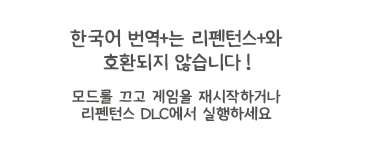
<style>
.page{position:relative;width:373px;height:167px;background:#ffffff}
.page>*{position:absolute;margin:0}
.t1{font:16px/17px "XiaolaiSC";letter-spacing:-0.075em;color:#53514e;font-weight:bold}
.t2{font:20px/24px "XiaolaiSC";letter-spacing:-0.1em;color:#53514e;font-weight:bold}
.t3{font:20px/37px "XiaolaiSC";letter-spacing:-0.1em;color:#53514e;font-weight:bold}
</style>
<div class="page">
<p class="t1" style="left:70px;top:29px;width:213px;height:93px;text-align:center"><span class="t2">한국어 번역+는 리펜턴스+와<br></span><span class="t3">호환되지 않습니다 ! <br></span>모드를 끄고 게임을 재시작하거나<br>리펜턴스 DLC에서 실행하세요</p>
</div>
